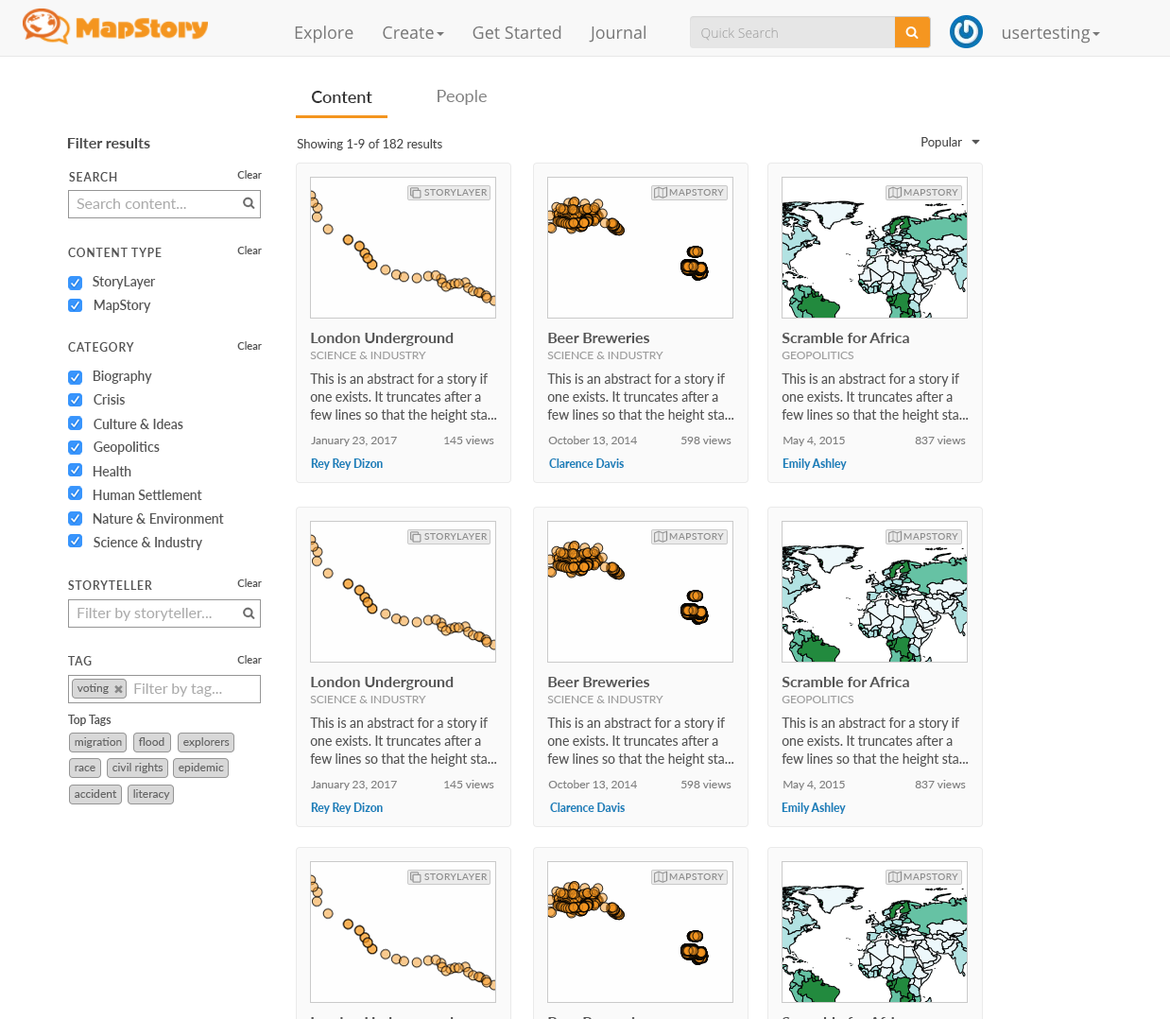
<style>
.page{position:relative;width:1170px;height:1019px;background:#ffffff}
.page>*{position:absolute;margin:0}
.t1{font:17px "Lato-Regular";color:#828282}
.t2{font:17px "Lato-Semibold";color:#333333}
.t3{font:12.3px "Lato-Regular";color:#4a4a4a}
.t4{font:15.1px "Lato-Bold";color:#4b4b4b}
.t5{font:11.3px "Lato-Semibold";letter-spacing:0.08em;color:#555555}
.t6{font:10.4px "Lato-Semibold";color:#555555}
.t7{font:9.5px "Lato-Regular";letter-spacing:0.06em;color:#8e8e8e}
.t8{font:15.1px "Lato-Regular";color:#ababab}
.t9{font:13.2px "Lato-Semibold";color:#555555}
.t10{font:15.1px "Lato-Bold";color:#555555}
.t11{font:11.3px "Lato-Regular";color:#9f9f9f;text-transform:uppercase}
.t12{font:13.2px/18px "Lato-Regular";color:#555555}
.t13{font:11.3px "Lato-Regular";color:#818181}
.t14{font:11.3px "Lato-Heavy";color:#1b80ba}
.t15{font:11.3px "Lato-Regular";color:#656565}
.t16{font:11.3px "Lato-Semibold";color:#555555}
</style>
<div class="page">
<p class="t1" style="left:438px;top:90px;width:49px;height:15px">People</p>
<p class="t2" style="left:311px;top:91px;width:61px;height:12px">Content</p>
<p class="t3" style="left:922px;top:137px;width:40px;height:11px">Popular</p>
<p class="t4" style="left:67px;top:138px;width:83px;height:10px">Filter results</p>
<p class="t3" style="left:297px;top:139px;width:145px;height:11px">Showing 1-9 of 182 results</p>
<p class="t5" style="left:69px;top:172px;width:48px;height:9px">SEARCH</p>
<p class="t6" style="left:237px;top:170px;width:25px;height:9px">Clear</p>
<p class="t7" style="left:424px;top:189px;width:64px;height:7px">STORYLAYER</p>
<p class="t7" style="left:669px;top:189px;width:55px;height:7px">MAPSTORY</p>
<p class="t7" style="left:904px;top:189px;width:54px;height:7px">MAPSTORY</p>
<p class="t8" style="left:77px;top:199px;width:109px;height:10px">Search content...</p>
<p class="t6" style="left:237px;top:246px;width:25px;height:8px">Clear</p>
<p class="t5" style="left:68px;top:248px;width:94px;height:9px">CONTENT TYPE</p>
<p class="t9" style="left:93px;top:276px;width:63px;height:13px">StoryLayer</p>
<p class="t9" style="left:94px;top:300px;width:57px;height:13px">MapStory</p>
<p class="t6" style="left:237px;top:341px;width:25px;height:9px">Clear</p>
<p class="t10" style="left:311px;top:333px;width:143px;height:13px">London Underground</p>
<p class="t10" style="left:548px;top:333px;width:102px;height:10px">Beer Breweries</p>
<p class="t10" style="left:782px;top:333px;width:127px;height:10px">Scramble for Africa</p>
<p class="t5" style="left:68px;top:342px;width:66px;height:10px">CATEGORY</p>
<p class="t11" style="left:310px;top:352px;width:116px;height:7px">Science &amp; Industry</p>
<p class="t11" style="left:547px;top:352px;width:117px;height:7px">Science &amp; Industry</p>
<p class="t11" style="left:782px;top:352px;width:73px;height:7px">GEOPOLITICS</p>
<p class="t9" style="left:93px;top:371px;width:59px;height:13px">Biography</p>
<p class="t12" style="left:310px;top:373px;width:187px;height:50px">This is an abstract for a story if<br>one exists. It truncates after a <br>few lines so that the height sta...</p>
<p class="t12" style="left:547px;top:373px;width:187px;height:50px">This is an abstract for a story if<br>one exists. It truncates after a <br>few lines so that the height sta...</p>
<p class="t12" style="left:782px;top:373px;width:187px;height:50px">This is an abstract for a story if<br>one exists. It truncates after a <br>few lines so that the height sta...</p>
<p class="t9" style="left:94px;top:394px;width:31px;height:11px">Crisis</p>
<p class="t9" style="left:94px;top:419px;width:89px;height:10px">Culture &amp; Ideas</p>
<p class="t13" style="left:311px;top:437px;width:86px;height:9px">January 23, 2017</p>
<p class="t13" style="left:444px;top:436px;width:50px;height:8px">145 views</p>
<p class="t13" style="left:548px;top:436px;width:89px;height:10px">October 13, 2014</p>
<p class="t13" style="left:681px;top:436px;width:51px;height:8px">598 views</p>
<p class="t13" style="left:784px;top:437px;width:61px;height:9px">May 4, 2015</p>
<p class="t13" style="left:915px;top:436px;width:51px;height:8px">837 views</p>
<p class="t9" style="left:94px;top:441px;width:66px;height:14px">Geopolitics</p>
<p class="t14" style="left:311px;top:458px;width:72px;height:12px">Rey Rey Dizon</p>
<p class="t14" style="left:549px;top:458px;width:75px;height:10px">Clarence Davis</p>
<p class="t14" style="left:783px;top:458px;width:64px;height:12px">Emily Ashley</p>
<p class="t9" style="left:93px;top:466px;width:38px;height:10px">Health</p>
<p class="t9" style="left:93px;top:490px;width:109px;height:10px">Human Settlement</p>
<p class="t9" style="left:93px;top:513px;width:131px;height:11px">Nature &amp; Environment</p>
<p class="t7" style="left:424px;top:533px;width:64px;height:7px">STORYLAYER</p>
<p class="t7" style="left:669px;top:533px;width:55px;height:7px">MAPSTORY</p>
<p class="t7" style="left:904px;top:533px;width:54px;height:7px">MAPSTORY</p>
<p class="t9" style="left:94px;top:537px;width:108px;height:13px">Science &amp; Industry</p>
<p class="t5" style="left:68px;top:580px;width:84px;height:10px">STORYTELLER</p>
<p class="t6" style="left:237px;top:578px;width:25px;height:9px">Clear</p>
<p class="t8" style="left:78px;top:608px;width:134px;height:13px">Filter by storyteller...</p>
<p class="t5" style="left:68px;top:656px;width:24px;height:9px">TAG</p>
<p class="t6" style="left:237px;top:655px;width:25px;height:9px">Clear</p>
<p class="t10" style="left:311px;top:677px;width:143px;height:13px">London Underground</p>
<p class="t10" style="left:548px;top:677px;width:102px;height:10px">Beer Breweries</p>
<p class="t10" style="left:782px;top:677px;width:127px;height:10px">Scramble for Africa</p>
<p class="t15" style="left:77px;top:683px;width:32px;height:11px">voting</p>
<p class="t8" style="left:134px;top:683px;width:88px;height:14px">Filter by tag...</p>
<p class="t11" style="left:310px;top:696px;width:116px;height:7px">Science &amp; Industry</p>
<p class="t11" style="left:547px;top:696px;width:117px;height:7px">Science &amp; Industry</p>
<p class="t11" style="left:782px;top:696px;width:73px;height:7px">GEOPOLITICS</p>
<p class="t16" style="left:68px;top:715px;width:44px;height:11px">Top Tags</p>
<p class="t12" style="left:310px;top:717px;width:187px;height:50px">This is an abstract for a story if<br>one exists. It truncates after a <br>few lines so that the height sta...</p>
<p class="t12" style="left:547px;top:717px;width:187px;height:50px">This is an abstract for a story if<br>one exists. It truncates after a <br>few lines so that the height sta...</p>
<p class="t12" style="left:782px;top:717px;width:187px;height:50px">This is an abstract for a story if<br>one exists. It truncates after a <br>few lines so that the height sta...</p>
<p class="t15" style="left:75px;top:737px;width:47px;height:11px">migration</p>
<p class="t15" style="left:138px;top:737px;width:26px;height:9px">flood</p>
<p class="t15" style="left:183px;top:737px;width:47px;height:11px">explorers</p>
<p class="t15" style="left:75px;top:766px;width:20px;height:5px">race</p>
<p class="t15" style="left:112px;top:763px;width:52px;height:10px">civil rights</p>
<p class="t15" style="left:179px;top:763px;width:45px;height:10px">epidemic</p>
<p class="t13" style="left:311px;top:781px;width:86px;height:9px">January 23, 2017</p>
<p class="t13" style="left:444px;top:780px;width:50px;height:8px">145 views</p>
<p class="t13" style="left:548px;top:780px;width:89px;height:10px">October 13, 2014</p>
<p class="t13" style="left:681px;top:780px;width:51px;height:8px">598 views</p>
<p class="t13" style="left:784px;top:781px;width:61px;height:9px">May 4, 2015</p>
<p class="t13" style="left:915px;top:780px;width:51px;height:8px">837 views</p>
<p class="t15" style="left:75px;top:789px;width:42px;height:9px">accident</p>
<p class="t15" style="left:133px;top:789px;width:37px;height:11px">literacy</p>
<p class="t14" style="left:311px;top:803px;width:72px;height:11px">Rey Rey Dizon</p>
<p class="t14" style="left:550px;top:803px;width:75px;height:9px">Clarence Davis</p>
<p class="t14" style="left:782px;top:803px;width:64px;height:11px">Emily Ashley</p>
<p class="t7" style="left:424px;top:873px;width:64px;height:7px">STORYLAYER</p>
<p class="t7" style="left:669px;top:873px;width:55px;height:7px">MAPSTORY</p>
<p class="t7" style="left:904px;top:873px;width:54px;height:7px">MAPSTORY</p>
</div>
